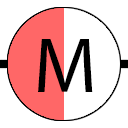
<style>
.page{position:relative;width:128px;height:128px;background:#ffffff}
.page>*{position:absolute;margin:0}
.t1{font:78.7px "MyriadPro-Regular";letter-spacing:0.1em;color:#000000}
</style>
<div class="page">
<p class="t1" style="left:38px;top:39px;width:55px;height:53px">M</p>
</div>
